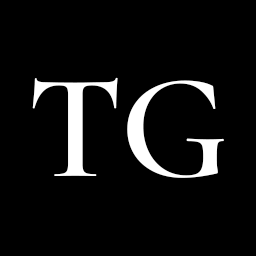
<style>
.page{position:relative;width:256px;height:256px;background:#000000}
.page>*{position:absolute;margin:0}
.t1{font:150px "CormorantGaramond-SemiBold";color:#ffffff}
</style>
<div class="page">
<p class="t1" style="left:32px;top:77px;width:192px;height:101px">TG</p>
</div>
